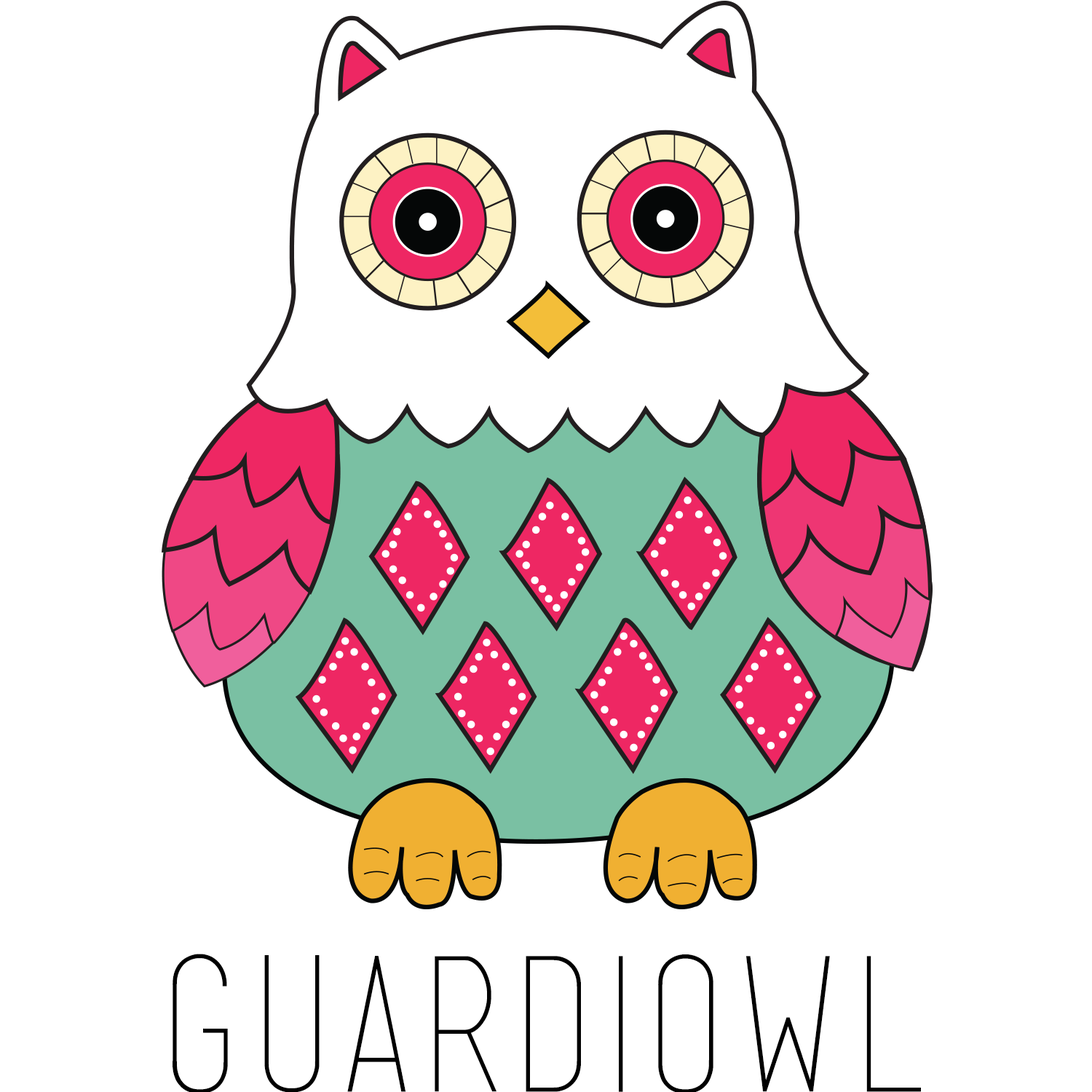
<style>
.page{position:relative;width:1092px;height:1092px;background:#ffffff}
.page>*{position:absolute;margin:0}
.t1{font:186.6px "basicl";color:#000000}
</style>
<div class="page">
<p class="t1" style="left:173px;top:954px;width:748px;height:139px">GUARDIOWL</p>
</div>
